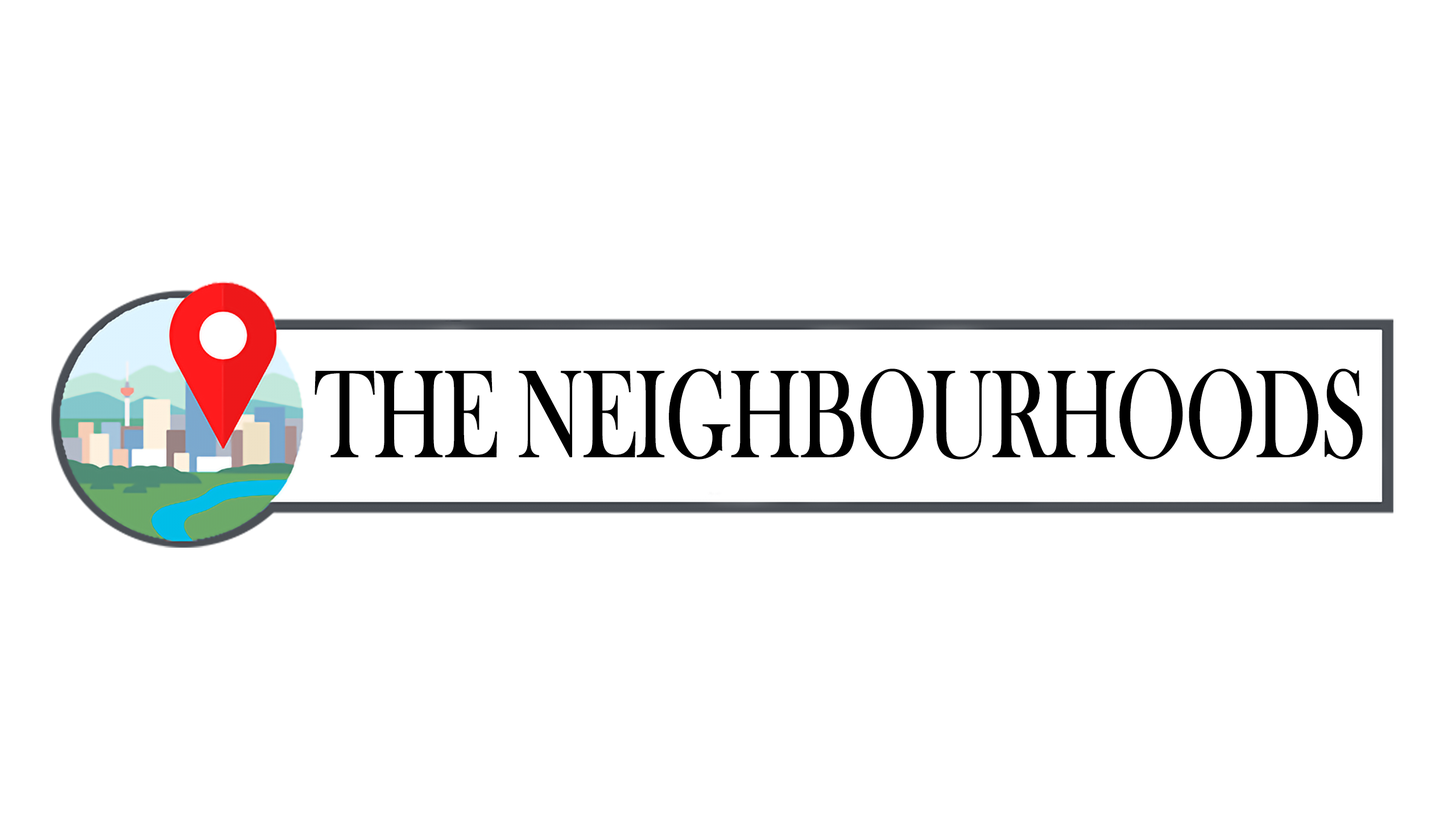
<style>
.page{position:relative;width:1456px;height:819px;background:#ffffff}
.page>*{position:absolute;margin:0}
.t1{font:128.6px "BaskOldFace";letter-spacing:-0.04em;color:#000000;text-transform:uppercase;font-weight:bold;scale:0.68 1}
</style>
<div class="page">
<p class="t1" style="left:315px;top:369px;width:1048px;height:91px">THE NEIGHBOURHOODS</p>
</div>
